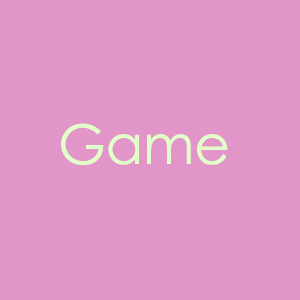
<style>
.page{position:relative;width:300px;height:300px;background:#e295c9}
.page>*{position:absolute;margin:0}
.t1{font:54.7px "CenturyGothic";color:#e2ffc9}
</style>
<div class="page">
<p class="t1" style="left:61px;top:123px;width:167px;height:42px">Game</p>
</div>
